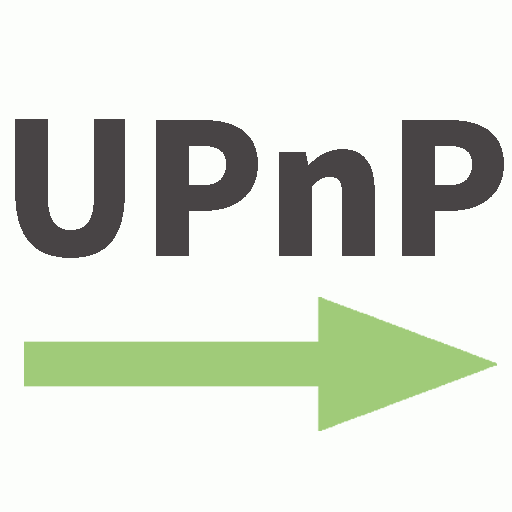
<style>
.page{position:relative;width:512px;height:512px;background:#fcfefb}
.page>*{position:absolute;margin:0}
.t1{font:183px "NotoSansTC-Black";color:#484445}
</style>
<div class="page">
<p class="t1" style="left:15px;top:119px;width:489px;height:139px">UPnP</p>
</div>
